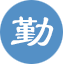
<style>
.page{position:relative;width:64px;height:64px;background:#5490c6}
.page>*{position:absolute;margin:0}
.t1{font:48px "LiSu";color:#fffffe}
</style>
<div class="page">
<p class="t1" style="left:10px;top:16px;width:44px;height:30px">勤</p>
</div>
